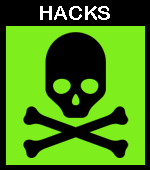
<style>
.page{position:relative;width:150px;height:170px;background:#7fee1d}
.page>*{position:absolute;margin:0}
.t1{font:20px "ArialRoundedMTBold";color:#ffffff}
</style>
<div class="page">
<p class="t1" style="left:40px;top:6px;width:70px;height:14px">HACKS</p>
</div>
